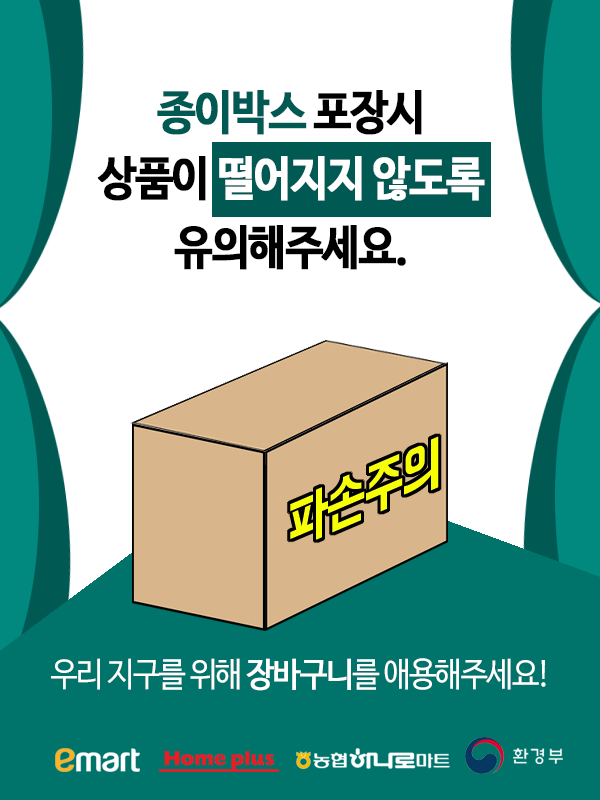
<style>
.page{position:relative;width:600px;height:800px;background:#ffffff}
.page>*{position:absolute;margin:0}
.t1{font:47.1px/65.9px "NanumBarunGothicBold";letter-spacing:-0.05em;color:#ffffff;font-weight:bold;scale:0.9 1}
.t2{font:47.1px/65.9px "NanumBarunGothicBold";letter-spacing:-0.05em;color:#005953;font-weight:bold;scale:0.9 1}
.t3{font:47.1px/65.9px "NanumBarunGothicBold";letter-spacing:-0.05em;color:#000000;font-weight:bold;scale:0.9 1}
.t4{font:47.1px/69.1px "NanumBarunGothicBold";letter-spacing:-0.05em;color:#000000;font-weight:bold;scale:0.9 1}
.t5{font:60.6px "BMHANNAPro";letter-spacing:-0.05em;color:#f6ff03;scale:0.85 1}
.t6{font:33.7px "NanumBarunGothic";letter-spacing:-0.05em;color:#ffffff;scale:0.91 1}
.t7{font:33.7px "NanumBarunGothic";letter-spacing:-0.05em;color:#ffffff;font-weight:bold;scale:0.91 1}
</style>
<div class="page">
<p class="t1" style="left:97px;top:90px;width:388px;height:180px;text-align:center"><span class="t2">종이박스</span><span class="t3"> 포장시<br>상품이 </span>떨어지지 않도록<br><span class="t4">유의해주세요.</span></p>
<p class="t5" style="left:290px;top:436px;width:149px;height:104px;rotate:-23deg">파손주의</p>
<p class="t6" style="left:51px;top:658px;width:495px;height:33px">우리 지구를 위해 <span class="t7">장바구니</span>를 애용해주세요!</p>
</div>
